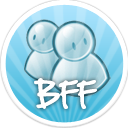
<style>
.page{position:relative;width:128px;height:128px;background:#ffffff}
.page>*{position:absolute;margin:0}
.t1{font:30px "Hand-Of-Sean";color:#ffffff}
</style>
<div class="page">
<p class="t1" style="left:34px;top:78px;width:63px;height:32px">BFF</p>
</div>
